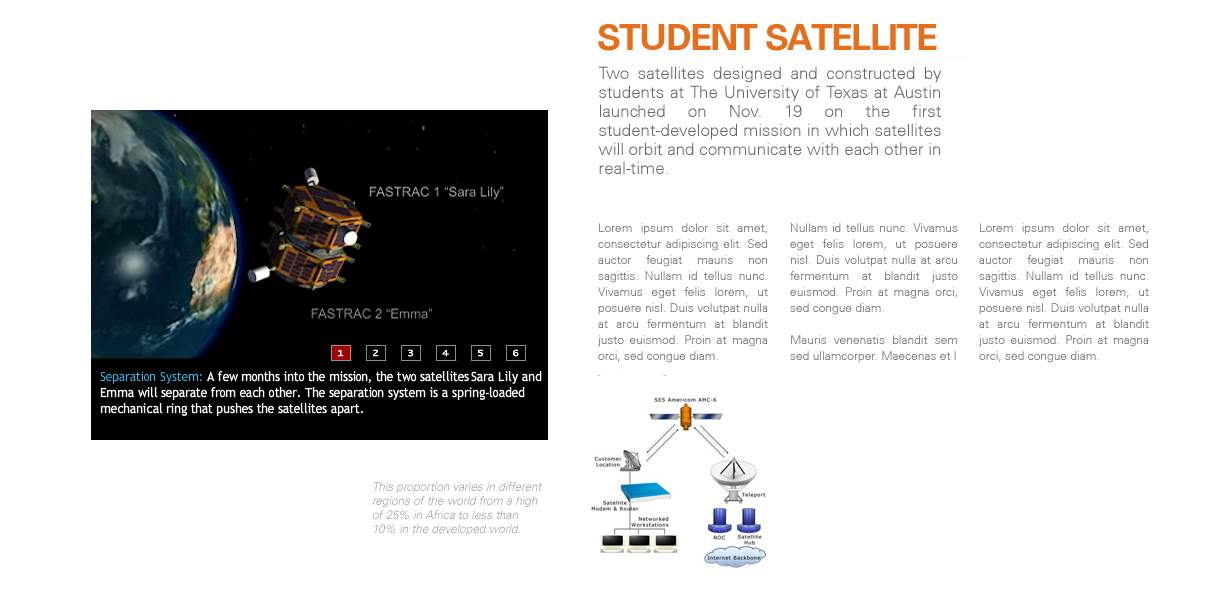
<style>
.page{position:relative;width:1214px;height:615px;background:#ffffff}
.page>*{position:absolute;margin:0}
.t1{font:36px "UniversCE-Bold";letter-spacing:-0.05em;color:#e4701e}
.t2{font:17px/19px "UniversCE-Light";color:#666666}
.t3{font:12px/16px "UniversCE-Light";color:#666666}
</style>
<div class="page">
<p class="t1" style="left:598px;top:24px;width:339px;height:27px">STUDENT SATELLITE</p>
<p class="t2" style="left:598px;top:66px;width:344px;height:108px;text-align:justify">Two satellites designed and constructed by students at The University of Texas at Austin launched on Nov. 19 on the first student-developed mission in which satellites will orbit and communicate with each other in real-time.</p>
<p class="t3" style="left:598px;top:223px;width:170px;height:140px;text-align:justify">Lorem ipsum dolor sit amet, consectetur adipiscing elit. Sed auctor feugiat mauris non sagittis. Nullam id tellus nunc. Vivamus eget felis lorem, ut posuere nisl. Duis volutpat nulla at arcu fermentum at blandit justo euismod. Proin at magna orci, sed congue diam.</p>
<p class="t3" style="left:790px;top:223px;width:168px;height:140px;text-align:justify">Nullam id tellus nunc. Vivamus eget felis lorem, ut posuere nisl. Duis volutpat nulla at arcu fermentum at blandit justo euismod. Proin at magna orci, sed congue diam. <br><br>Mauris venenatis blandit sem sed ullamcorper. Maecenas et l</p>
<p class="t3" style="left:979px;top:223px;width:170px;height:140px;text-align:justify">Lorem ipsum dolor sit amet, consectetur adipiscing elit. Sed auctor feugiat mauris non sagittis. Nullam id tellus nunc. Vivamus eget felis lorem, ut posuere nisl. Duis volutpat nulla at arcu fermentum at blandit justo euismod. Proin at magna orci, sed congue diam.</p>
</div>
